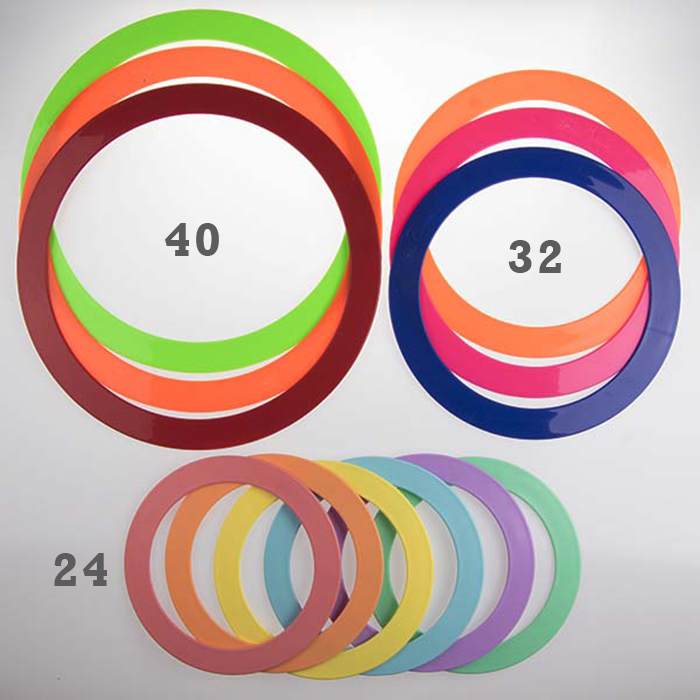
<style>
.page{position:relative;width:700px;height:700px}
.page>*{position:absolute;margin:0}
.t1{font:48.6px "Rockwell-Bold";letter-spacing:0.075em;color:#5c5c5c}
</style>
<div class="page">
<p class="t1" style="left:164px;top:223px;width:55px;height:33px">40</p>
<p class="t1" style="left:508px;top:240px;width:53px;height:33px">32</p>
<p class="t1" style="left:54px;top:553px;width:53px;height:33px">24</p>
</div>
